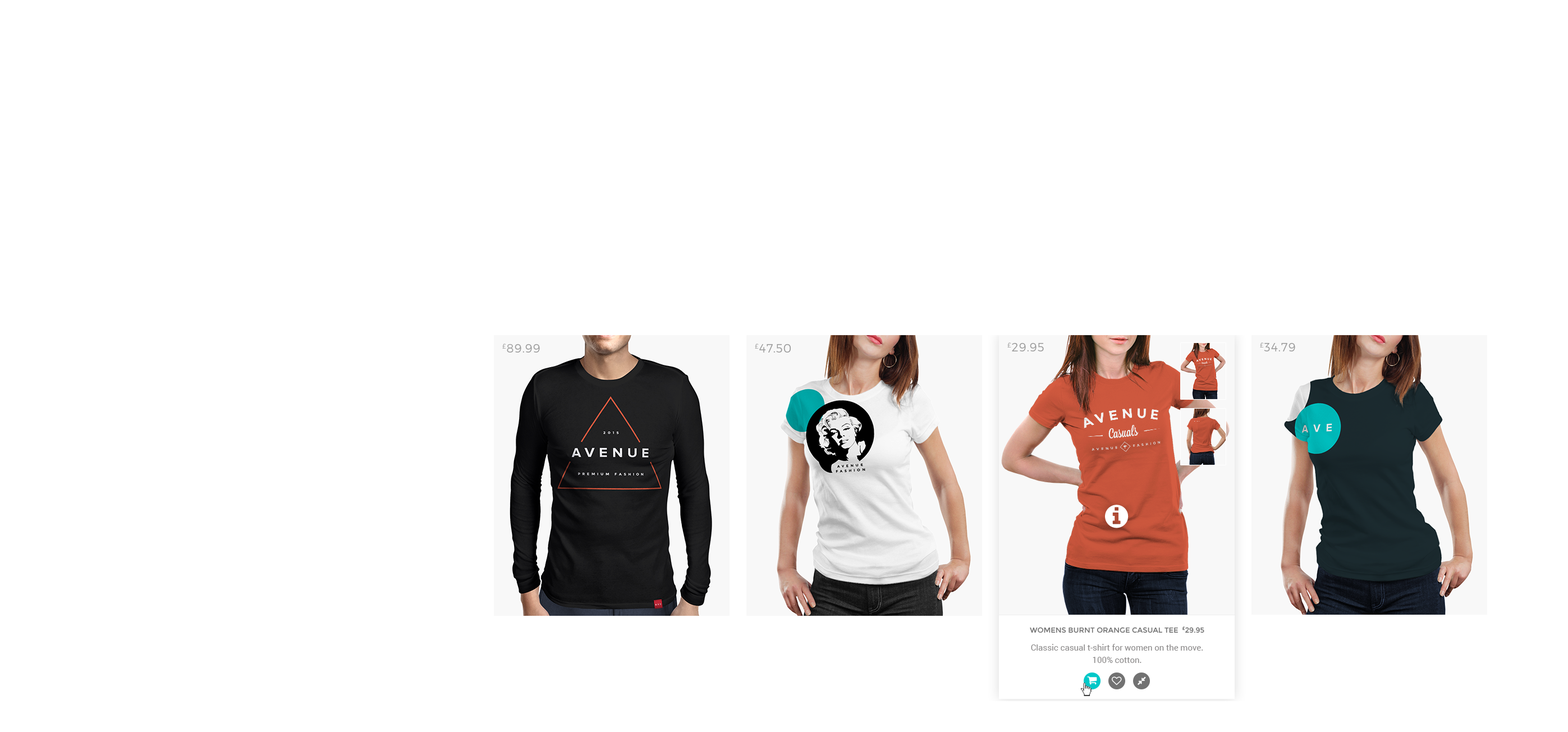
<style>
.page{position:relative;width:1568px;height:732px;background:#ffffff}
.page>*{position:absolute;margin:0}
.t1{font:11.8px "Montserrat-Light";letter-spacing:0.05em;color:#9a9a9a;text-transform:uppercase}
.t2{font:7.3px "Montserrat-Regular";color:#727272;text-transform:uppercase}
.t3{font:8.4px/12.3px "Roboto-Regular";color:#8e8c8c}
.t4{font:8.4px/11.2px "Montserrat-Regular";color:#8e8c8c}
</style>
<div class="page">
<p class="t1" style="left:502px;top:343px;width:38px;height:9px">£89.99</p>
<p class="t1" style="left:755px;top:343px;width:36px;height:9px">£47.50</p>
<p class="t1" style="left:1007px;top:342px;width:37px;height:9px">£29.95</p>
<p class="t1" style="left:1260px;top:342px;width:35px;height:9px">£34.79</p>
<p class="t2" style="left:1030px;top:626px;width:174px;height:7px">Womens burnt orange casual tee  £29.95</p>
<p class="t3" style="left:1031px;top:644px;width:172px;height:19px;text-align:center">Classic casual t-shirt for women on the move. <br>100% cotton.<br><span class="t4">A hard-wearing sports t-shirt with microvent technology.</span></p>
</div>
